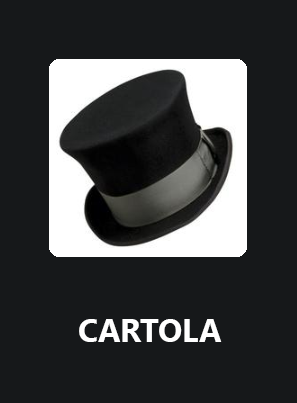
<style>
.page{position:relative;width:297px;height:403px;background:#16181a}
.page>*{position:absolute;margin:0}
.t1{font:32px "SegoeUI-Bold";color:#ffffff}
</style>
<div class="page">
<p class="t1" style="left:79px;top:319px;width:143px;height:23px">CARTOLA</p>
</div>
